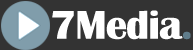
<style>
.page{position:relative;width:193px;height:50px;background:#333333}
.page>*{position:absolute;margin:0}
.t1{font:41.2px "BritannicBold";letter-spacing:-0.025em;color:#ffffff;scale:1.04 1}
.t2{font:41.2px "BritannicBold";letter-spacing:-0.025em;color:#607d8b;scale:1.04 1}
</style>
<div class="page">
<p class="t1" style="left:52px;top:10px;width:139px;height:30px">7Media<span class="t2">.</span></p>
</div>
